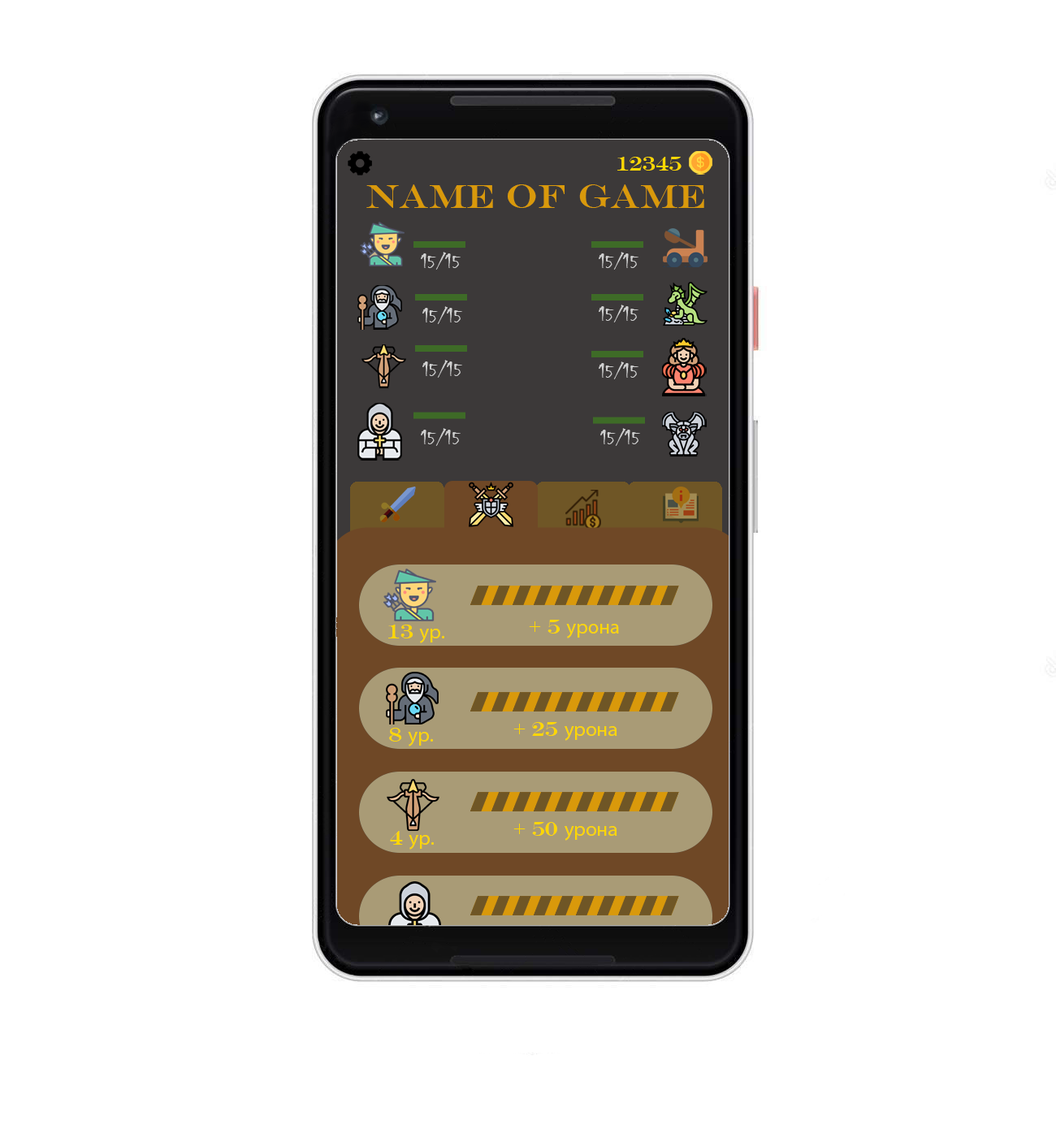
<style>
.page{position:relative;width:1056px;height:1129px;background:#ffffff}
.page>*{position:absolute;margin:0}
.t1{font:20.3px "EngraversMT";color:#ffd700}
.t2{font:33.8px "EngraversMT";color:#d9990b}
.t3{font:20.3px "Chiller-Regular";color:#d0d0d0}
.t4{font:20.3px "MyriadPro-Regular";color:#ffd700}
</style>
<div class="page">
<p class="t1" style="left:617px;top:157px;width:65px;height:14px">12345</p>
<p class="t2" style="left:366px;top:184px;width:338px;height:24px">Name of Game</p>
<p class="t3" style="left:421px;top:252px;width:40px;height:18px">15/15</p>
<p class="t3" style="left:599px;top:252px;width:39px;height:18px">15/15</p>
<p class="t3" style="left:599px;top:305px;width:39px;height:17px">15/15</p>
<p class="t3" style="left:422px;top:306px;width:40px;height:18px">15/15</p>
<p class="t3" style="left:422px;top:360px;width:40px;height:18px">15/15</p>
<p class="t3" style="left:599px;top:361px;width:39px;height:18px">15/15</p>
<p class="t3" style="left:421px;top:428px;width:40px;height:18px">15/15</p>
<p class="t3" style="left:600px;top:428px;width:40px;height:18px">15/15</p>
<p class="t4" style="left:388px;top:625px;width:56px;height:18px"><span class="t1">13 </span>ур.</p>
<p class="t4" style="left:529px;top:620px;width:90px;height:18px"><span class="t1">+ 5 </span>урона</p>
<p class="t4" style="left:513px;top:722px;width:104px;height:19px"><span class="t1">+ 25 </span>урона</p>
<p class="t4" style="left:389px;top:728px;width:44px;height:19px"><span class="t1">8 </span>ур.</p>
<p class="t4" style="left:390px;top:831px;width:44px;height:19px"><span class="t1">4 </span>ур.</p>
<p class="t4" style="left:513px;top:822px;width:104px;height:19px"><span class="t1">+ 50 </span>урона</p>
</div>
